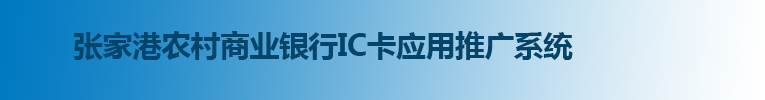
<style>
.page{position:relative;width:765px;height:100px}
.page>*{position:absolute;margin:0}
.t1{font:30px "MicrosoftYaHei-Bold";letter-spacing:-0.02em;color:#03446a}
</style>
<div class="page">
<p class="t1" style="left:74px;top:31px;width:499px;height:29px">张家港农村商业银行IC卡应用推广系统</p>
</div>
